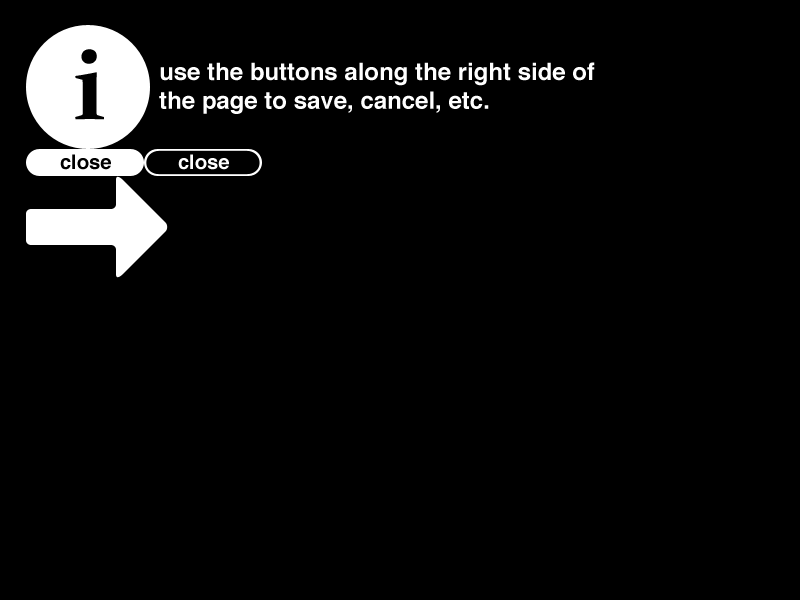
<style>
.page{position:relative;width:800px;height:600px;background:#000000}
.page>*{position:absolute;margin:0}
.t1{font:100px "Constantia-Bold";color:#000000}
.t2{font:24px "Helvetica-Bold";color:#ffffff}
.t3{font:20px "Helvetica-Bold";color:#000000}
.t4{font:20px "Helvetica-Bold";color:#ffffff}
</style>
<div class="page">
<p class="t1" style="left:75px;top:49px;width:29px;height:71px">i</p>
<p class="t2" style="left:159px;top:62px;width:436px;height:52px">use the buttons along the right side of<br>the page to save, cancel, etc.</p>
<p class="t3" style="left:60px;top:154px;width:51px;height:16px">close</p>
<p class="t4" style="left:178px;top:154px;width:51px;height:16px">close</p>
</div>
